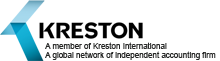
<style>
.page{position:relative;width:220px;height:61px;background:#ffffff}
.page>*{position:absolute;margin:0}
.t1{font:8px "ArialMT";color:#272827}
</style>
<div class="page">
<p class="t1" style="left:45px;top:42px;width:171px;height:18px">A member of Kreston International<br>A global network of independent accounting firm</p>
</div>
